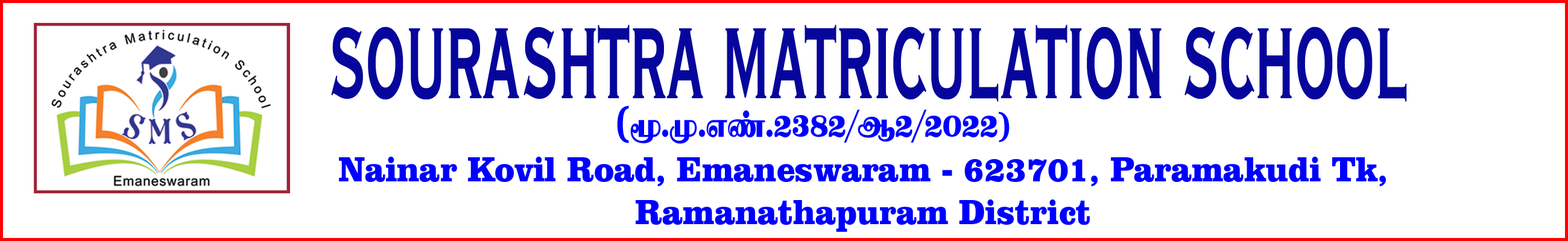
<style>
.page{position:relative;width:1568px;height:241px;background:#ffffff}
.page>*{position:absolute;margin:0}
.t1{font:133.4px "CopperplateGothicBT-BoldCond";color:#06069c;scale:0.55 1}
.t2{font:35.9px "ClarendonBT-Black";color:#0000ff;scale:0.9 1}
</style>
<div class="page">
<p class="t1" style="left:331px;top:25px;width:1076px;height:77px">SOURASHTRA MATRICULATION SCHOOL</p>
<p class="t2" style="left:339px;top:157px;width:1047px;height:75px;text-align:center">Nainar Kovil Road, Emaneswaram - 623701, Paramakudi Tk, <br>Ramanathapuram District</p>
</div>
